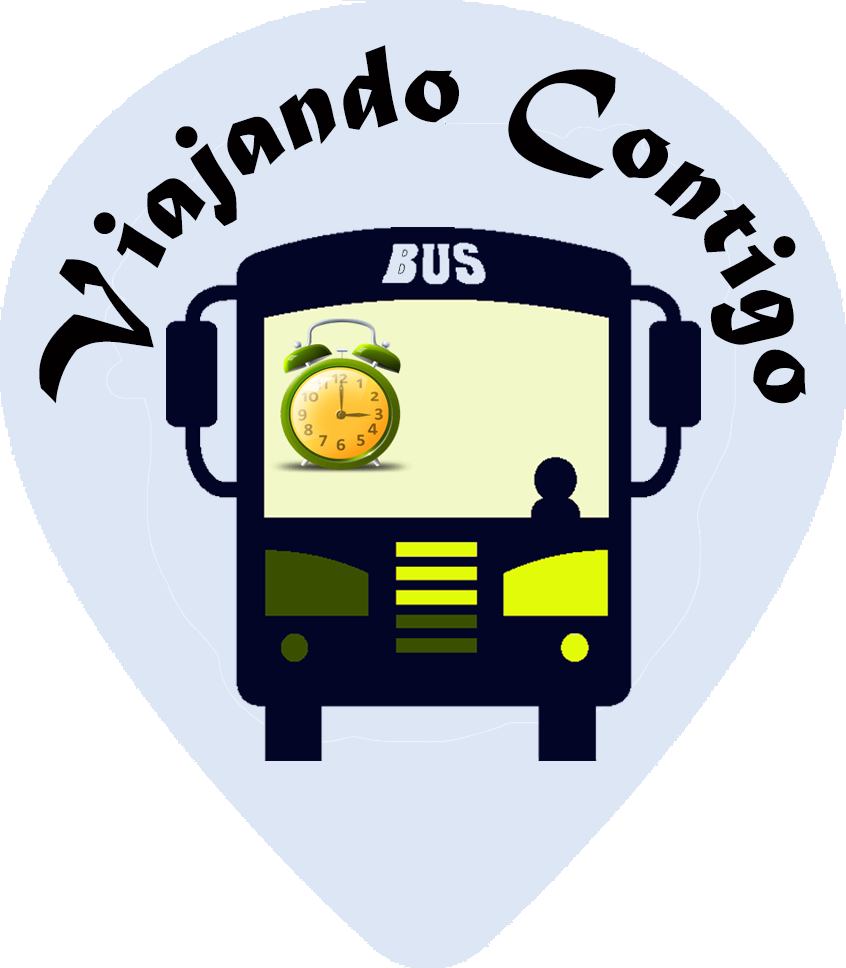
<style>
.page{position:relative;width:846px;height:968px;background:#dce6f5}
.page>*{position:absolute;margin:0}
.t1{font:120px "MaturaMTScriptCapitals";color:#020000}
</style>
<div class="page">
<p class="t1" style="left:39px;top:45px;width:767px;height:359px">Viajando Contigo</p>
</div>
